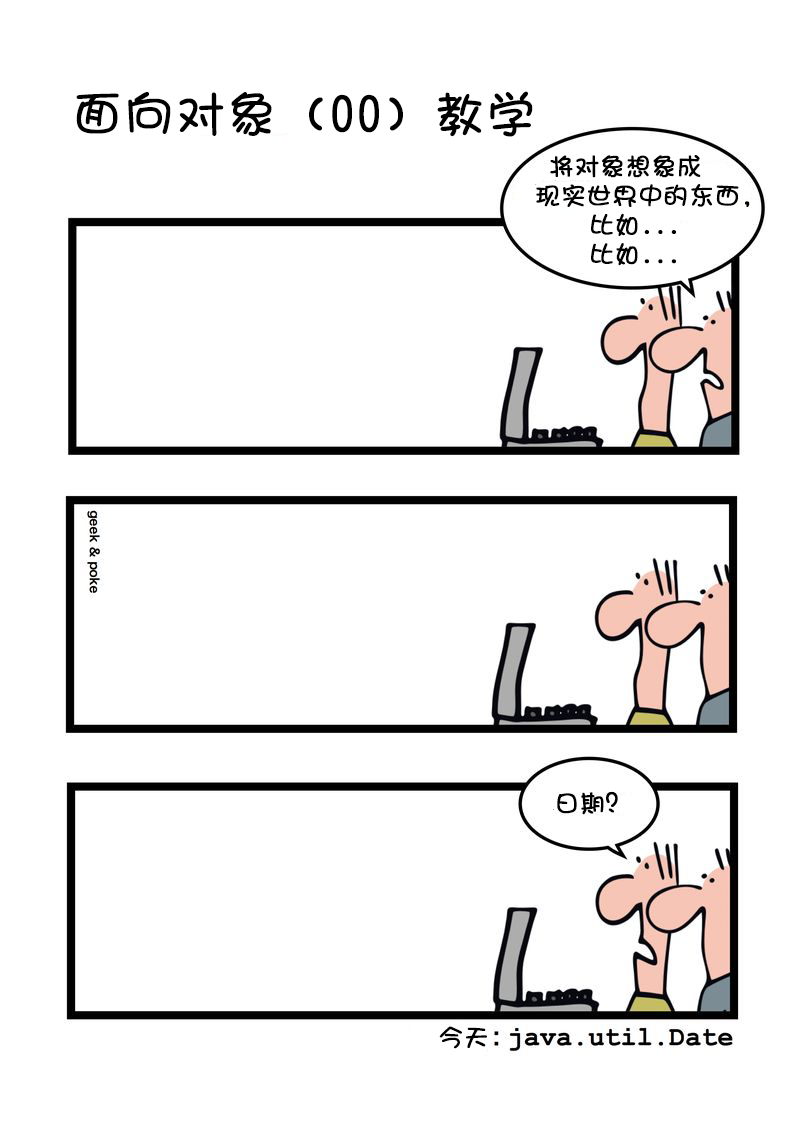
<style>
.page{position:relative;width:800px;height:1132px;background:#ffffff}
.page>*{position:absolute;margin:0}
.t1{font:50px "DFShaoNvW5";color:#000000;font-weight:bold}
.t2{font:25px/29.2px "DFShaoNvW5";color:#000000;font-weight:bold}
.t3{font:25px "DFShaoNvW5";color:#000000;font-weight:bold}
</style>
<div class="page">
<p class="t1" style="left:76px;top:91px;width:457px;height:46px">面向对象（OO）教学</p>
<p class="t2" style="left:536px;top:155px;width:214px;height:111px">将对象想象成<br>现实世界中的东西,<br>    比如...<br>    比如...</p>
<p class="t3" style="left:557px;top:791px;width:61px;height:24px">日期？</p>
<p class="t3" style="left:439px;top:1026px;width:48px;height:23px">今天</p>
</div>
